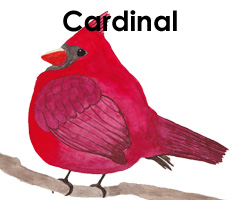
<style>
.page{position:relative;width:236px;height:200px;background:#ffffff}
.page>*{position:absolute;margin:0}
.t1{font:28px "CenturyGothic-Bold";color:#000000}
</style>
<div class="page">
<p class="t1" style="left:63px;top:10px;width:114px;height:22px">Cardinal</p>
</div>
